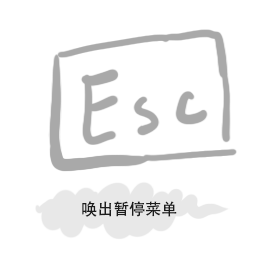
<style>
.page{position:relative;width:256px;height:256px;background:#ffffff}
.page>*{position:absolute;margin:0}
.t1{font:16px "AdobeHeitiStd-Regular";color:#1c1c1c}
</style>
<div class="page">
<p class="t1" style="left:82px;top:201px;width:95px;height:16px">唤出暂停菜单</p>
</div>
